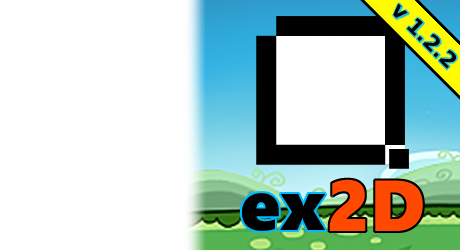
<style>
.page{position:relative;width:460px;height:250px;background:#fefefe}
.page>*{position:absolute;margin:0}
.t1{font:21.4px "BitstreamVeraSans-Bold";color:#010000}
.t2{font:72px "SegoeWP-Black";color:#ff4800}
.t3{font:72px "SegoeWP-Black";color:#000000}
</style>
<div class="page">
<p class="t1" style="left:393px;top:3px;width:63px;height:66px;rotate:45deg">v 1.2.2</p>
<p class="t2" style="left:329px;top:179px;width:94px;height:52px">2D</p>
<p class="t3" style="left:242px;top:193px;width:83px;height:38px">ex</p>
</div>
